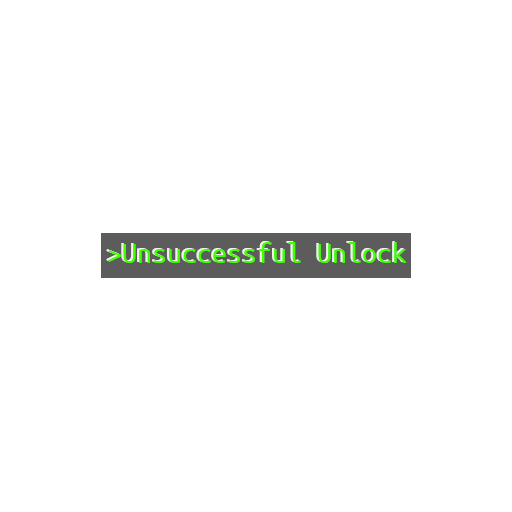
<style>
.page{position:relative;width:512px;height:512px;background:#ffffff}
.page>*{position:absolute;margin:0}
.t1{font:30px "UbuntuMono-Regular"}
.t2{font:30px "UbuntuMono-Regular";color:#42ff00}
</style>
<div class="page">
<p class="t1" style="left:106px;top:241px;width:299px;height:21px">&gt;Unsuccessful Unlock</p>
<p class="t2" style="left:108px;top:242px;width:299px;height:21px">&gt;Unsuccessful Unlock</p>
</div>
